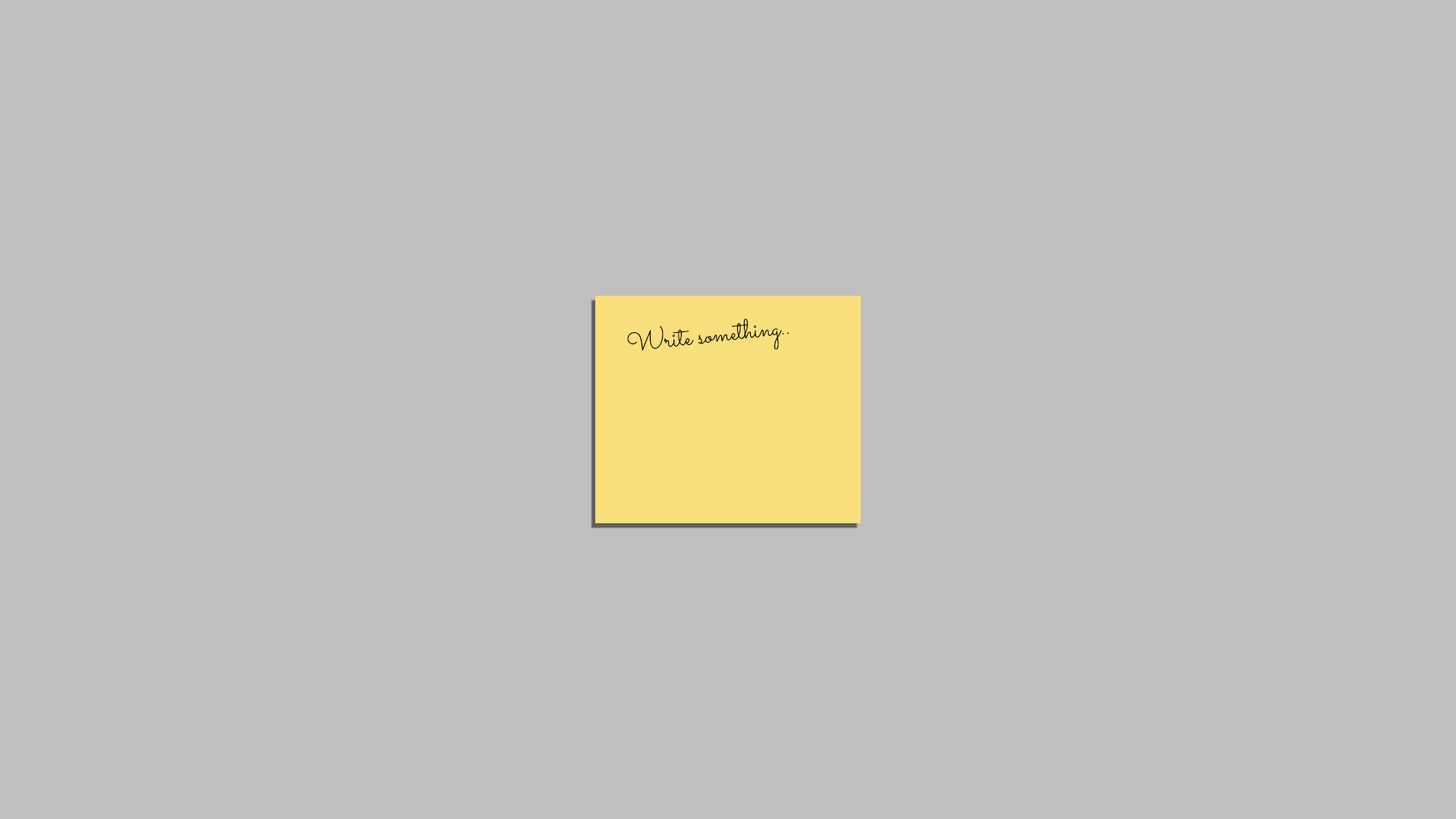
<style>
.page{position:relative;width:1456px;height:819px;background:#bfbfbf}
.page>*{position:absolute;margin:0}
.t1{font:27.3px "Sacramento-Regular";color:#000000}
</style>
<div class="page">
<p class="t1" style="left:627px;top:318px;width:162px;height:33px;rotate:-6deg">Write something..</p>
</div>
